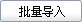
<style>
.page{position:relative;width:82px;height:22px;background:#ffffff}
.page>*{position:absolute;margin:0}
.t1{font:12px "SimSun";letter-spacing:-0.05em;color:#000000}
</style>
<div class="page">
<p class="t1" style="left:19px;top:6px;width:46px;height:11px">批量导入</p>
</div>
